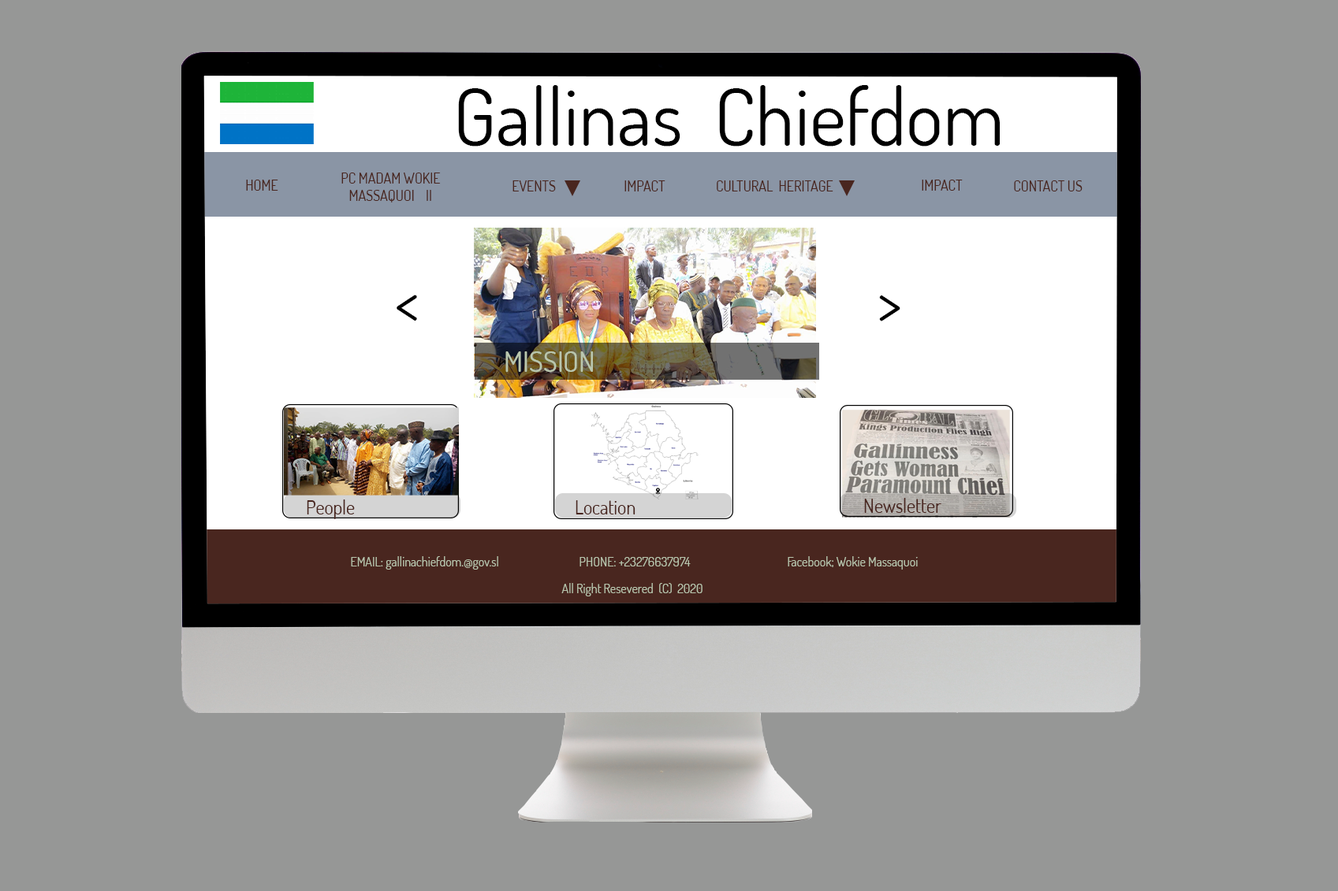
<style>
.page{position:relative;width:1338px;height:891px;background:#969796}
.page>*{position:absolute;margin:0}
.t1{font:78.8px "Dosis-Regular";color:#000000}
.t2{font:14.2px "Dosis-Regular";color:#49261f}
.t3{font:28.4px "Dosis-Regular";color:#b9c6ae}
.t4{font:18.9px "Dosis-Regular";color:#49261f}
.t5{font:12.6px "Dosis-Regular";color:#b9c6ae}
</style>
<div class="page">
<p class="t1" style="left:458px;top:85px;width:541px;height:62px">Gallinas  Chiefdom</p>
<p class="t2" style="left:341px;top:173px;width:100px;height:30px;text-align:center">PC MADAM WOKIE<br>MASSAQUOI    II</p>
<p class="t2" style="left:246px;top:180px;width:32px;height:11px">HOME</p>
<p class="t2" style="left:512px;top:181px;width:44px;height:11px">EVENTS</p>
<p class="t2" style="left:624px;top:181px;width:41px;height:11px">IMPACT</p>
<p class="t2" style="left:716px;top:181px;width:117px;height:11px">CULTURAL  HERITAGE</p>
<p class="t2" style="left:921px;top:180px;width:41px;height:11px">IMPACT</p>
<p class="t2" style="left:1014px;top:181px;width:68px;height:11px">CONTACT US</p>
<p class="t3" style="left:505px;top:352px;width:88px;height:20px">MISSION</p>
<p class="t4" style="left:307px;top:500px;width:48px;height:19px">People</p>
<p class="t4" style="left:575px;top:501px;width:60px;height:14px">Location</p>
<p class="t4" style="left:864px;top:498px;width:77px;height:15px">Newsletter</p>
<p class="t5" style="left:351px;top:556px;width:147px;height:14px">EMAIL: gallinachiefdom.@gov.sl</p>
<p class="t5" style="left:579px;top:557px;width:111px;height:10px">PHONE: +23276637974</p>
<p class="t5" style="left:787px;top:556px;width:130px;height:14px">Facebook; Wokie Massaquoi</p>
<p class="t5" style="left:561px;top:583px;width:141px;height:14px">All Right Resevered  (C)  2020</p>
</div>
